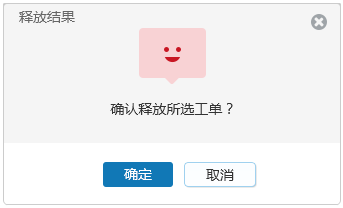
<style>
.page{position:relative;width:343px;height:208px;background:#f5f5f5}
.page>*{position:absolute;margin:0}
.t1{font:14px "MicrosoftYaHei";color:#666666}
.t2{font:14px "MicrosoftYaHei";color:#333333}
.t3{font:14px "MicrosoftYaHei";color:#ffffff}
</style>
<div class="page">
<p class="t1" style="left:19px;top:11px;width:56px;height:12px">释放结果</p>
<p class="t2" style="left:110px;top:103px;width:123px;height:12px">确认释放所选工单？</p>
<p class="t3" style="left:124px;top:168px;width:28px;height:12px">确定</p>
<p class="t2" style="left:206px;top:169px;width:28px;height:12px">取消</p>
</div>
